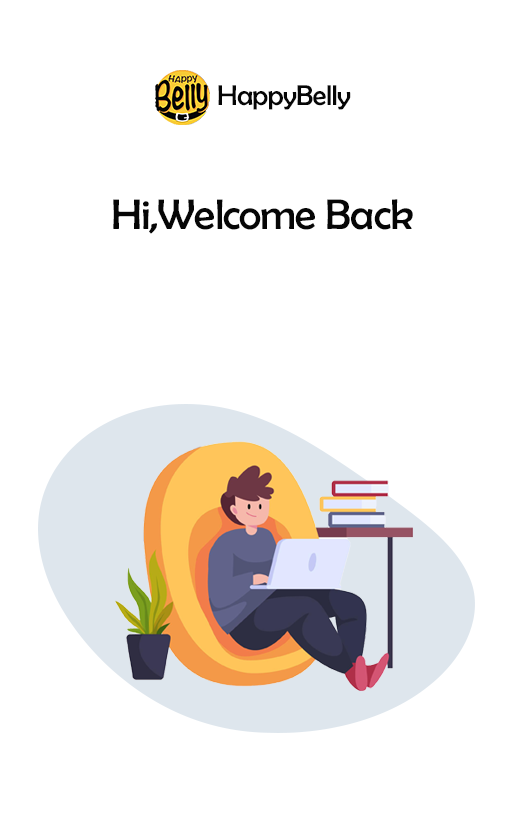
<style>
.page{position:relative;width:527px;height:832px;background:#ffffff}
.page>*{position:absolute;margin:0}
.t1{font:28.6px "BerlinSansFB-Reg";letter-spacing:-0.02em;color:#060606}
.t2{font:43px "BerlinSansFB-Reg";letter-spacing:-0.02em;color:#060606}
</style>
<div class="page">
<p class="t1" style="left:218px;top:85px;width:133px;height:25px">HappyBelly</p>
<p class="t2" style="left:113px;top:199px;width:300px;height:35px">Hi,Welcome Back</p>
</div>
